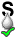
<style>
.page{position:relative;width:15px;height:37px;background:#ffffff}
.page>*{position:absolute;margin:0}
.t1{font:20.5px "Arial-BoldMT";color:#000000}
</style>
<div class="page">
<p class="t1" style="left:2px;top:1px;width:12px;height:16px">S</p>
</div>
